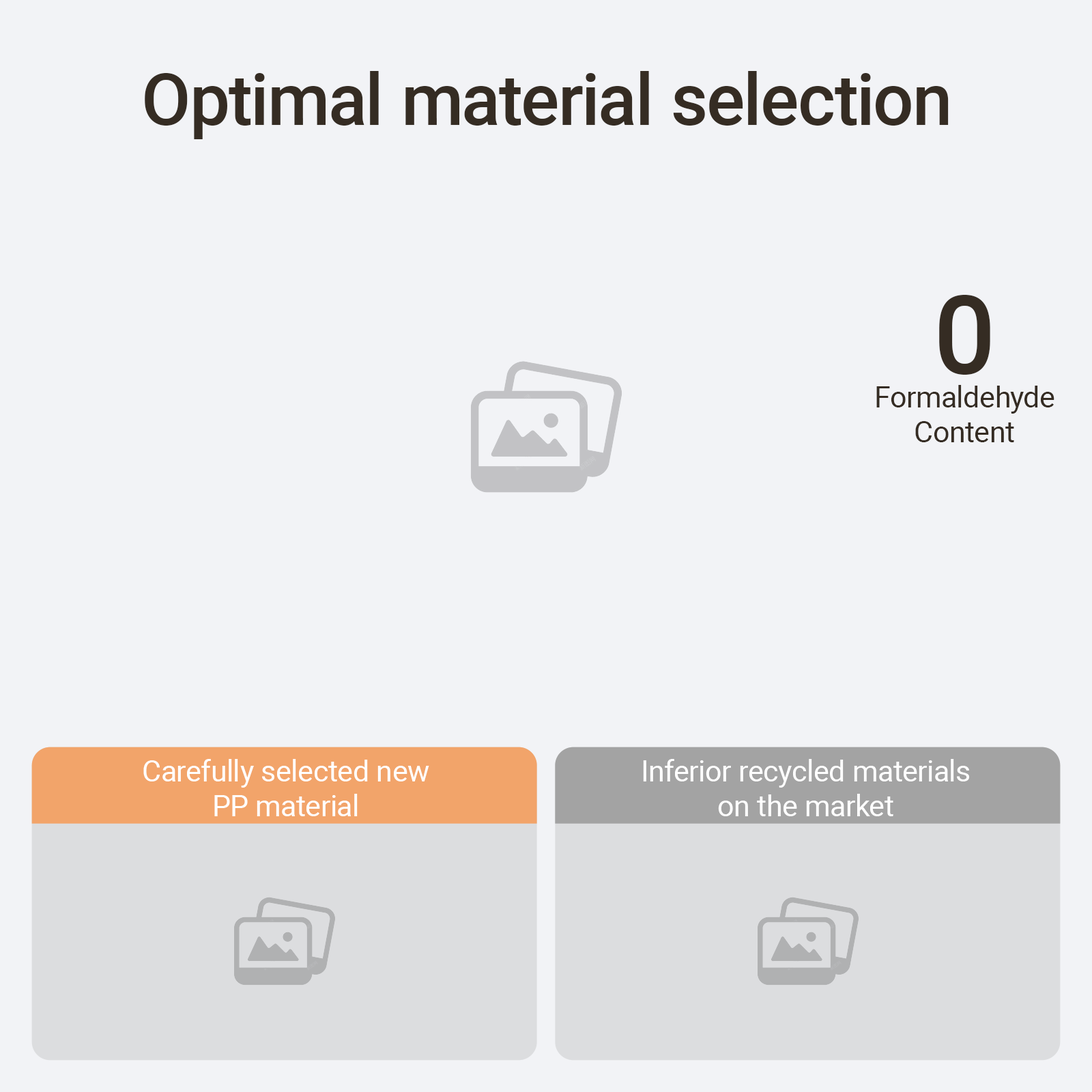
<style>
.page{position:relative;width:1092px;height:1092px;background:#f2f3f6}
.page>*{position:absolute;margin:0}
.t1{font:71.3px "Roboto-Medium";color:#352c23}
.t2{font:109.2px "Roboto-Medium";color:#352c23}
.t3{font:29.1px "Roboto-Regular";color:#352c23}
.t4{font:29.1px "Roboto-Regular";color:#ffffff}
</style>
<div class="page">
<p class="t1" style="left:145px;top:71px;width:804px;height:68px">Optimal material selection</p>
<p class="t2" style="left:939px;top:295px;width:51px;height:80px">0</p>
<p class="t3" style="left:876px;top:385px;width:178px;height:57px;text-align:center">Formaldehyde<br>Content</p>
<p class="t4" style="left:143px;top:759px;width:286px;height:57px;text-align:center">Carefully selected new<br>PP material</p>
<p class="t4" style="left:643px;top:759px;width:326px;height:57px;text-align:center">Inferior recycled materials<br>on the market</p>
</div>
